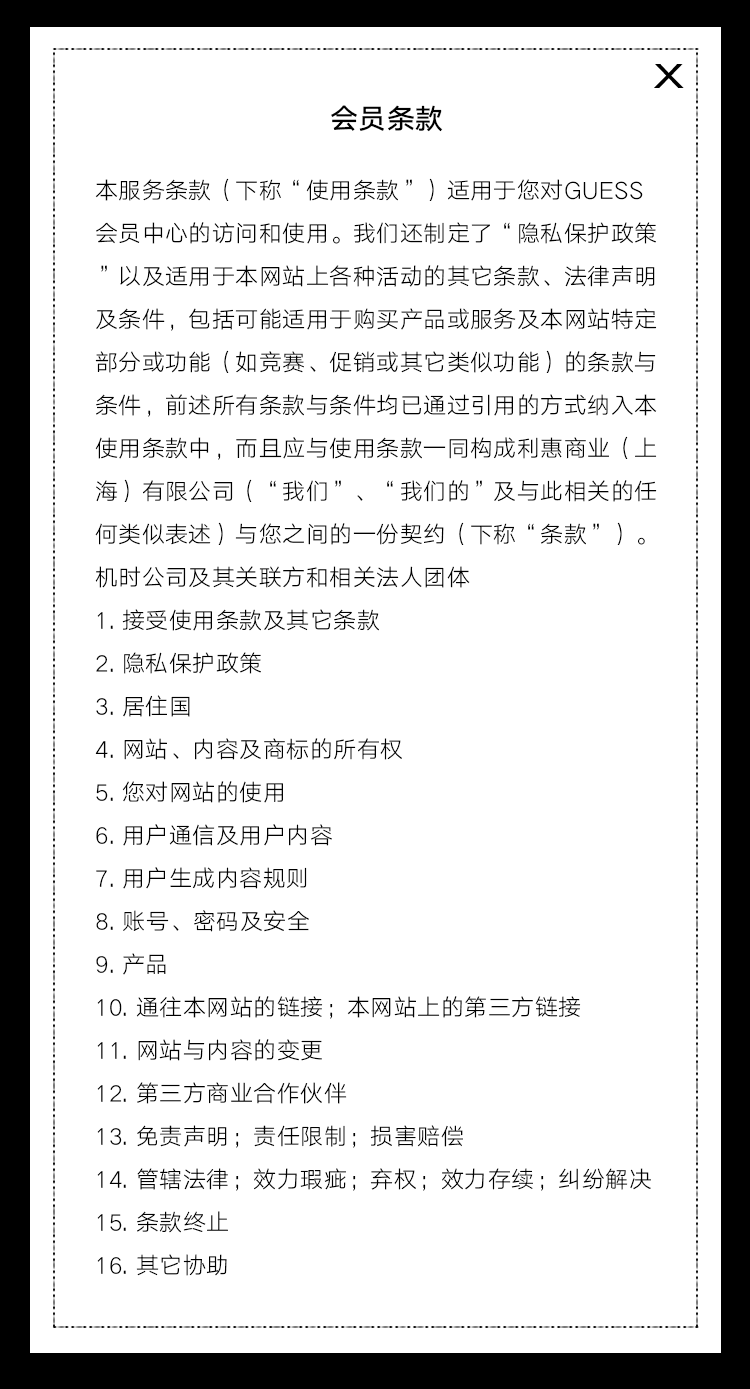
<style>
.page{position:relative;width:750px;height:1389px;background:#ffffff}
.page>*{position:absolute;margin:0}
.t1{font:28px "HYQiHei-FZS";letter-spacing:0.02em;color:#000000}
.t2{font:23px/43px "HYQiHei-DZS";letter-spacing:0.02em;color:#000000}
</style>
<div class="page">
<p class="t1" style="left:331px;top:105px;width:112px;height:27px">会员条款</p>
<p class="t2" style="left:95px;top:178px;width:562px;height:1098px">本服务条款（下称“使用条款”）适用于您对GUESS会员中心的访问和使用。我们还制定了“隐私保护政策”以及适用于本网站上各种活动的其它条款、法律声明及条件，包括可能适用于购买产品或服务及本网站特定部分或功能（如竞赛、促销或其它类似功能）的条款与条件，前述所有条款与条件均已通过引用的方式纳入本使用条款中，而且应与使用条款一同构成利惠商业（上海）有限公司（“我们”、“我们的”及与此相关的任何类似表述）与您之间的一份契约（下称“条款”）。<br>机时公司及其关联方和相关法人团体<br>1. 接受使用条款及其它条款<br>2. 隐私保护政策<br>3. 居住国<br>4. 网站、内容及商标的所有权<br>5. 您对网站的使用<br>6. 用户通信及用户内容<br>7. 用户生成内容规则<br>8. 账号、密码及安全<br>9. 产品<br>10. 通往本网站的链接；本网站上的第三方链接<br>11. 网站与内容的变更<br>12. 第三方商业合作伙伴<br>13. 免责声明；责任限制；损害赔偿<br>14. 管辖法律；效力瑕疵；弃权；效力存续；纠纷解决<br>15. 条款终止<br>16. 其它协助</p>
</div>
